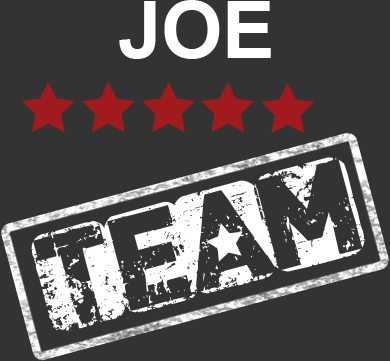
<style>
.page{position:relative;width:390px;height:361px;background:#333333}
.page>*{position:absolute;margin:0}
.t1{font:78.6px "Arial-BoldMT";color:#ffffff}
.t2{font:118.6px "CFPunkisnotDead-Regular";color:#ffffff}
</style>
<div class="page">
<p class="t1" style="left:119px;top:0px;width:152px;height:59px">JOE</p>
<p class="t2" style="left:31px;top:157px;width:334px;height:175px;rotate:-15deg">team</p>
</div>
